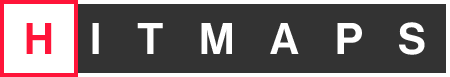
<style>
.page{position:relative;width:450px;height:77px;background:#333333}
.page>*{position:absolute;margin:0}
.t1{font:43.6px "NHaasGroteskDSW02-65Md";letter-spacing:0.82em;color:#ffffff}
.t2{font:43.6px "NHaasGroteskDSW02-65Md";letter-spacing:0.82em;color:#ff1439}
</style>
<div class="page">
<p class="t1" style="left:26px;top:22px;width:399px;height:33px"><span class="t2">H</span>ITMAPS</p>
</div>
